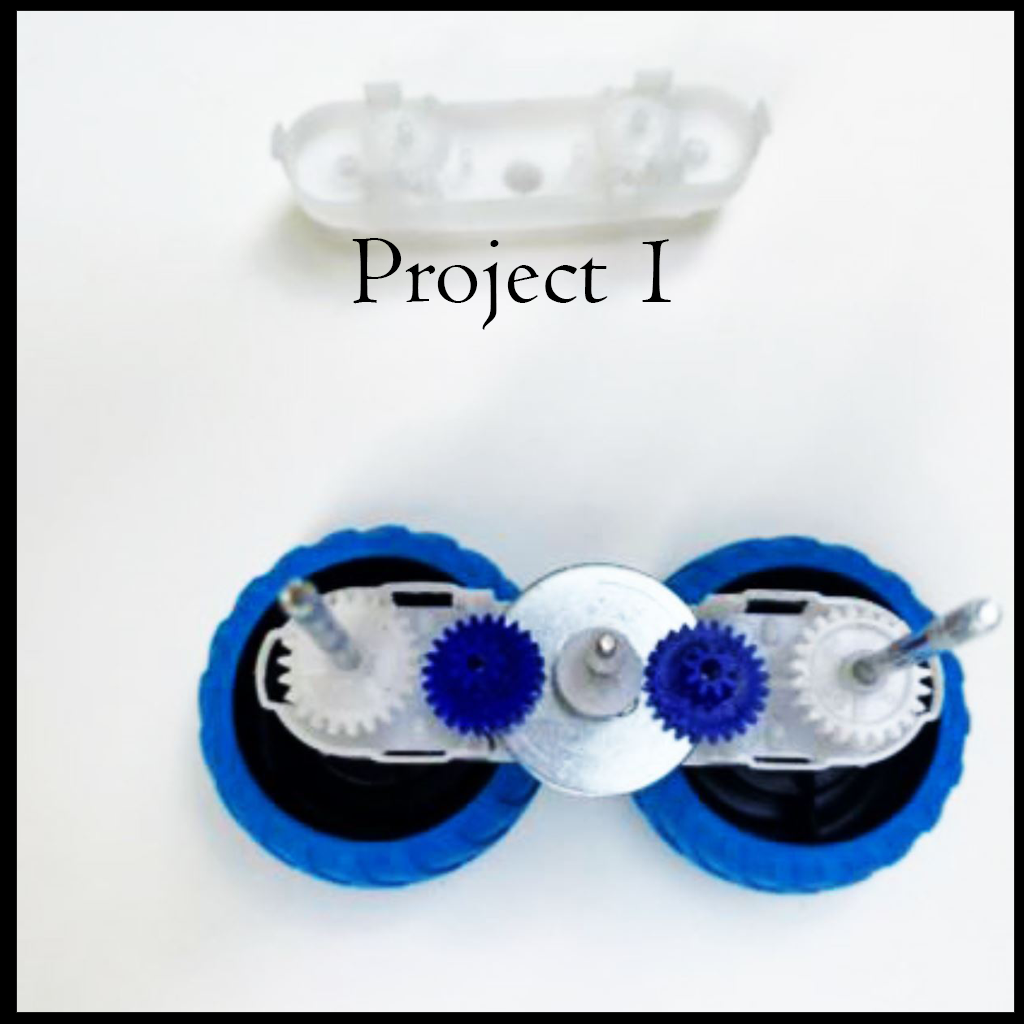
<style>
.page{position:relative;width:1024px;height:1024px}
.page>*{position:absolute;margin:0}
.t1{font:100px "Centaur";color:#000000}
</style>
<div class="page">
<p class="t1" style="left:352px;top:238px;width:319px;height:92px">Project 1</p>
</div>
